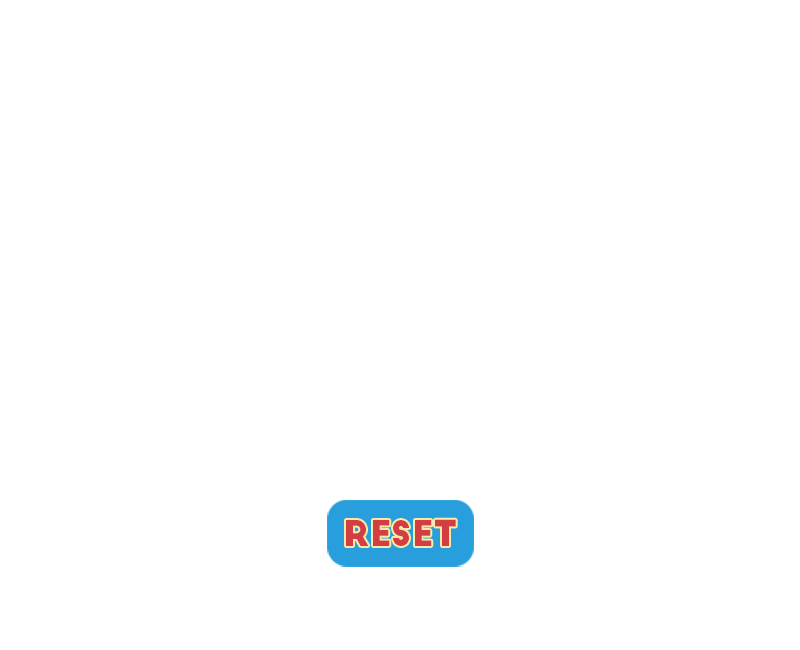
<style>
.page{position:relative;width:800px;height:650px;background:#ffffff}
.page>*{position:absolute;margin:0}
.t1{font:35px "BigJohn";color:#d33e43}
</style>
<div class="page">
<p class="t1" style="left:346px;top:519px;width:110px;height:27px">RESET</p>
</div>
